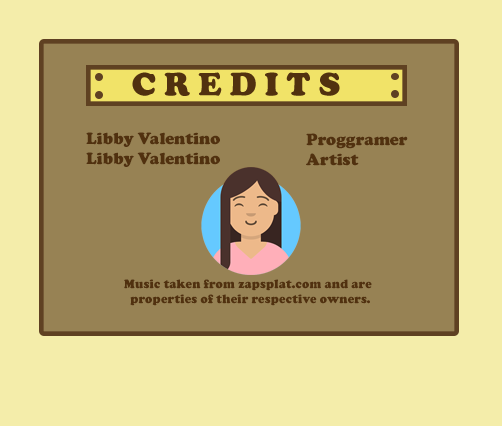
<style>
.page{position:relative;width:502px;height:426px;background:#f4edaa}
.page>*{position:absolute;margin:0}
.t1{font:16.7px "CooperBlack";color:#51310f}
.t2{font:12.5px "CooperBlack";color:#51310f}
</style>
<div class="page">
<p class="t1" style="left:86px;top:132px;width:134px;height:35px">Libby Valentino<br>Libby Valentino</p>
<p class="t1" style="left:306px;top:133px;width:102px;height:33px">Proggramer<br>Artist</p>
<p class="t2" style="left:124px;top:279px;width:248px;height:27px">Music taken from zapsplat.com and are<br>  properties of their respective owners.</p>
</div>
